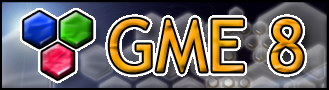
<style>
.page{position:relative;width:329px;height:90px}
.page>*{position:absolute;margin:0}
.t1{font:72.6px "TrebuchetMS";letter-spacing:-0.002em}
</style>
<div class="page">
<p class="t1" style="left:109px;top:18px;width:194px;height:55px">GME 8</p>
</div>
